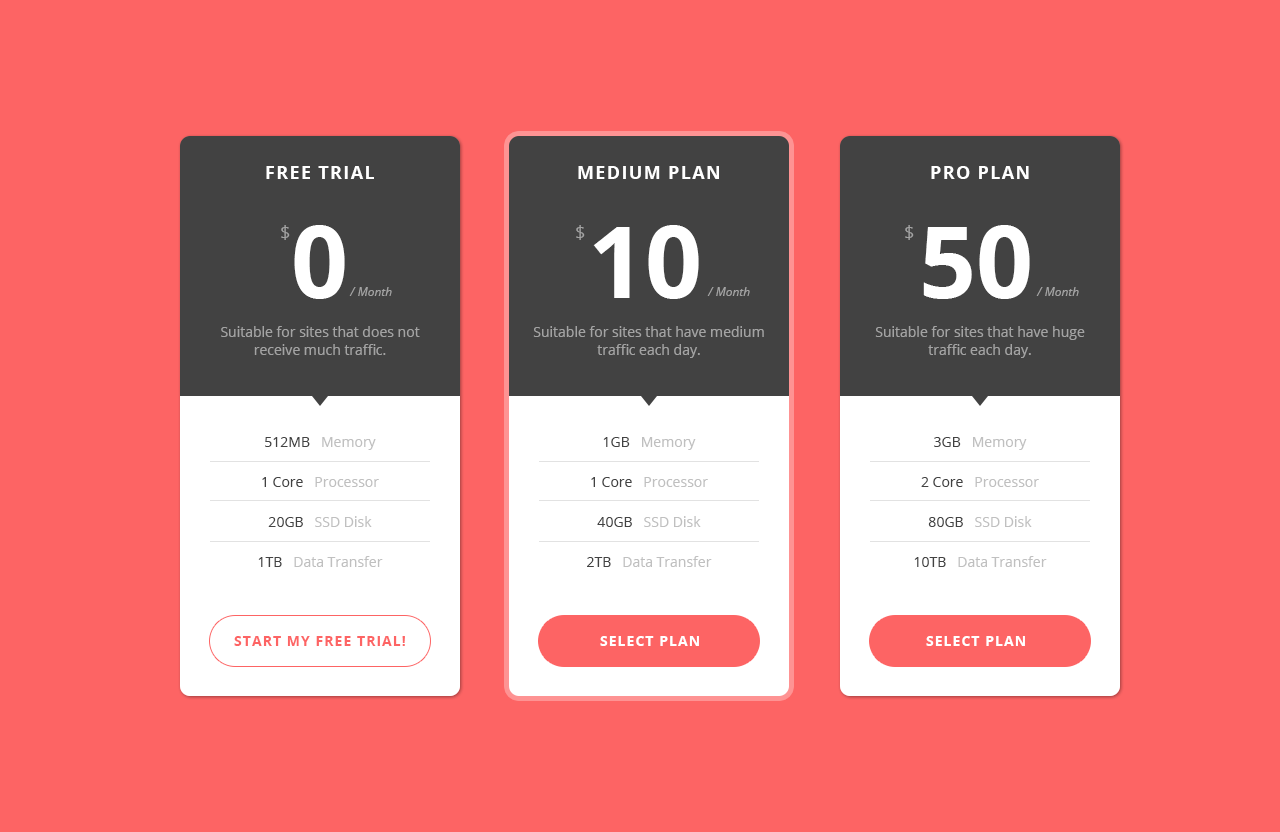
<style>
.page{position:relative;width:1280px;height:832px;background:#fd6464}
.page>*{position:absolute;margin:0}
.t1{font:18px "OpenSans-Bold";letter-spacing:0.075em;color:#ffffff}
.t2{font:18px "OpenSans";letter-spacing:0.075em;color:#a3a3a3}
.t3{font:100px "OpenSans-Bold";letter-spacing:0.075em;color:#ffffff}
.t4{font:100px "OpenSans-Bold";color:#ffffff}
.t5{font:12px "OpenSans-Italic";color:#a3a3a3}
.t6{font:14px/18px "OpenSans";color:#a3a3a3}
.t7{font:14px/40px "OpenSans";color:#c0c0c0}
.t8{font:14px/40px "OpenSans";color:#424242}
.t9{font:14px "OpenSans-Bold";letter-spacing:0.075em;color:#fd6464}
.t10{font:14px "OpenSans-Bold";letter-spacing:0.075em;color:#ffffff}
.t11{font:14px "OpenSans-Bold";letter-spacing:0.075em;color:#ffffff;text-transform:uppercase}
</style>
<div class="page">
<p class="t1" style="left:266px;top:166px;width:108px;height:13px">FREE TRIAL</p>
<p class="t1" style="left:578px;top:166px;width:141px;height:13px">MEDIUM PLAN</p>
<p class="t1" style="left:931px;top:166px;width:98px;height:13px">PRO PLAN</p>
<p class="t2" style="left:281px;top:225px;width:9px;height:15px">$</p>
<p class="t3" style="left:294px;top:225px;width:51px;height:74px">0</p>
<p class="t2" style="left:576px;top:225px;width:9px;height:15px">$</p>
<p class="t4" style="left:593px;top:225px;width:106px;height:74px">10</p>
<p class="t2" style="left:905px;top:225px;width:9px;height:15px">$</p>
<p class="t4" style="left:923px;top:225px;width:107px;height:74px">50</p>
<p class="t5" style="left:349px;top:287px;width:43px;height:9px">/ Month</p>
<p class="t5" style="left:707px;top:287px;width:43px;height:9px">/ Month</p>
<p class="t5" style="left:1036px;top:287px;width:43px;height:9px">/ Month</p>
<p class="t6" style="left:221px;top:326px;width:199px;height:29px;text-align:center">Suitable for sites that does not receive much traffic.</p>
<p class="t6" style="left:533px;top:326px;width:231px;height:32px;text-align:center">Suitable for sites that have medium traffic each day.</p>
<p class="t6" style="left:875px;top:326px;width:210px;height:32px;text-align:center">Suitable for sites that have huge traffic each day.</p>
<p class="t7" style="left:258px;top:437px;width:125px;height:130px;text-align:center"><span class="t8">512MB   </span>Memory<br><span class="t8">1 Core   </span>Processor<br><span class="t8">20GB   </span>SSD Disk<br><span class="t8">1TB   </span>Data Transfer</p>
<p class="t7" style="left:587px;top:437px;width:125px;height:130px;text-align:center"><span class="t8">1GB   </span>Memory<br><span class="t8">1 Core   </span>Processor<br><span class="t8">40GB   </span>SSD Disk<br><span class="t8">2TB   </span>Data Transfer</p>
<p class="t7" style="left:914px;top:437px;width:133px;height:130px;text-align:center"><span class="t8">3GB   </span>Memory<br><span class="t8">2 Core   </span>Processor<br><span class="t8">80GB   </span>SSD Disk<br><span class="t8">10TB   </span>Data Transfer</p>
<p class="t9" style="left:234px;top:636px;width:171px;height:10px">START MY FREE TRIAL!</p>
<p class="t10" style="left:600px;top:636px;width:99px;height:10px">SELECT PLAN</p>
<p class="t11" style="left:926px;top:636px;width:99px;height:10px">Select Plan</p>
</div>
